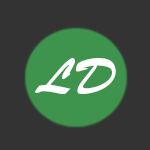
<style>
.page{position:relative;width:150px;height:150px;background:#333333}
.page>*{position:absolute;margin:0}
.t1{font:50px "BrushScriptStd";color:#ffffff}
</style>
<div class="page">
<p class="t1" style="left:35px;top:58px;width:81px;height:36px">LD</p>
</div>
